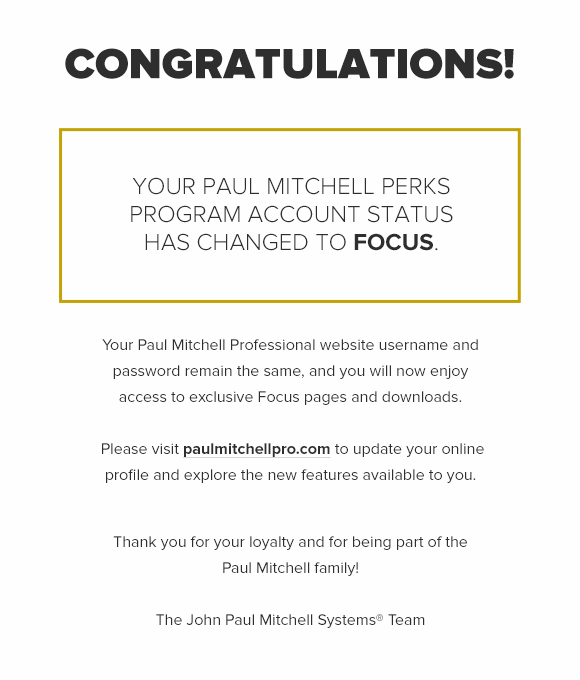
<style>
.page{position:relative;width:580px;height:680px;background:#fffefe}
.page>*{position:absolute;margin:0}
.t1{font:44px "ProximaNova-Black";color:#2e2e2e;text-transform:uppercase}
.t2{font:24px/28px "ProximaNova-Light";color:#2e2e2e;text-transform:uppercase}
.t3{font:24px/28px "ProximaNova-Bold";color:#2e2e2e;text-transform:uppercase}
.t4{font:16px/26px "ProximaNova-Regular";color:#2e2e2e}
.t5{font:16px/26px "ProximaNova-Bold";color:#2e2e2e;text-decoration:underline}
</style>
<div class="page">
<p class="t1" style="left:65px;top:48px;width:449px;height:31px">Congratulations!</p>
<p class="t2" style="left:131px;top:177px;width:322px;height:74px;text-align:center">your Paul Mitchell Perks Program Account Status has changed to <span class="t3">Focus</span>.</p>
<p class="t4" style="left:102px;top:339px;width:382px;height:144px;text-align:center">Your Paul Mitchell Professional website username and password remain the same, and you will now enjoy access to exclusive Focus pages and downloads.<br><br> Please visit <span class="t5">paulmitchellpro.com </span>to update your online profile and explore the new features available to you.</p>
<p class="t4" style="left:113px;top:536px;width:354px;height:92px;text-align:center">Thank you for your loyalty and for being part of the Paul Mitchell family!<br><br>The John Paul Mitchell Systems® Team</p>
</div>
